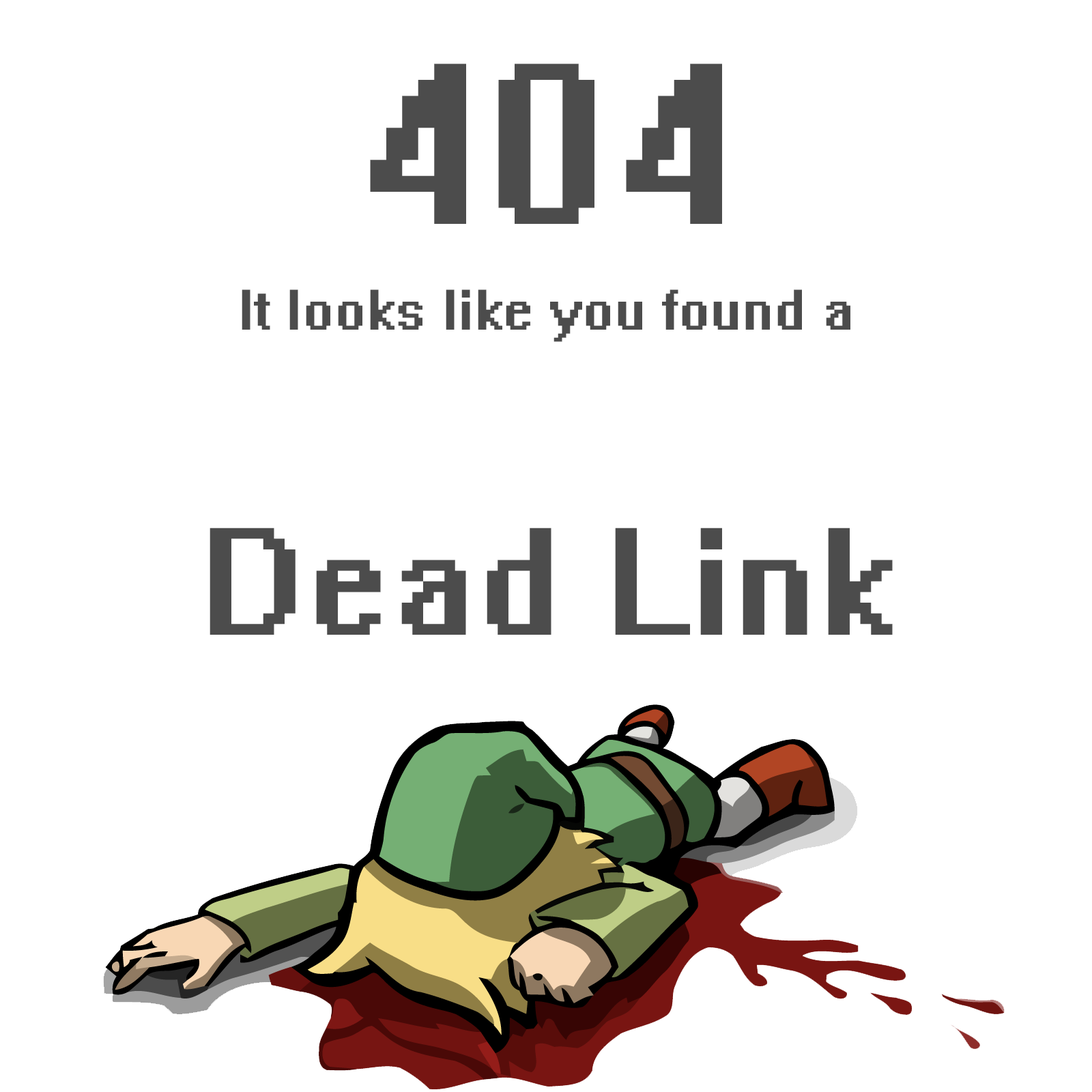
<style>
.page{position:relative;width:1092px;height:1092px;background:#ffffff}
.page>*{position:absolute;margin:0}
.t1{font:204.7px "System";color:#4c4c4c}
.t2{font:51.2px "System";color:#4c4c4c}
.t3{font:136.5px "System";color:#4c4c4c}
</style>
<div class="page">
<p class="t1" style="left:370px;top:63px;width:352px;height:161px">404</p>
<p class="t2" style="left:242px;top:289px;width:608px;height:53px">It looks like you found a</p>
<p class="t3" style="left:210px;top:528px;width:683px;height:107px">Dead Link</p>
</div>
